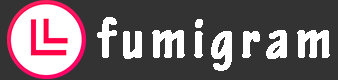
<style>
.page{position:relative;width:338px;height:80px;background:#333333}
.page>*{position:absolute;margin:0}
.t1{font:60.3px "TektonPro-BoldCond";letter-spacing:0.087em;color:#fefefe;font-weight:bold}
</style>
<div class="page">
<p class="t1" style="left:97px;top:17px;width:233px;height:54px">fumigram</p>
</div>
